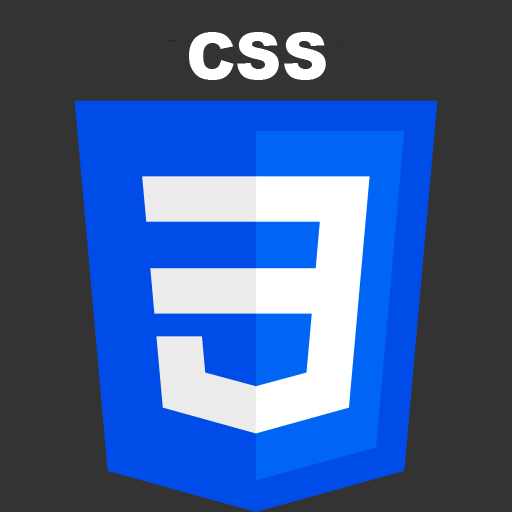
<style>
.page{position:relative;width:512px;height:512px;background:#333333}
.page>*{position:absolute;margin:0}
.t1{font:64px "Arial-Black";color:#ffffff}
</style>
<div class="page">
<p class="t1" style="left:189px;top:32px;width:137px;height:48px">CSS</p>
</div>
